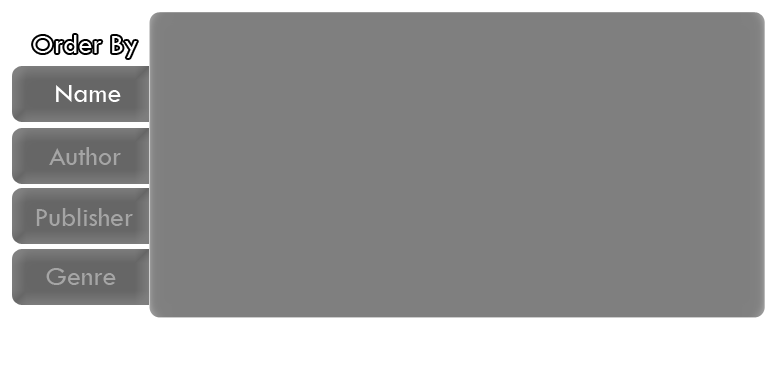
<style>
.page{position:relative;width:782px;height:365px;background:#7f7f7f}
.page>*{position:absolute;margin:0}
.t1{font:28.1px "TwCenMT-Regular";color:#ffffff}
.t2{font:28.1px "TwCenMT-Regular";color:#a5a5a5}
</style>
<div class="page">
<p class="t1" style="left:56px;top:85px;width:65px;height:17px">Name</p>
<p class="t2" style="left:49px;top:147px;width:72px;height:18px">Author</p>
<p class="t2" style="left:36px;top:208px;width:97px;height:18px">Publisher</p>
<p class="t2" style="left:46px;top:268px;width:70px;height:17px">Genre</p>
</div>
